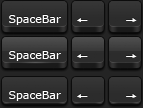
<style>
.page{position:relative;width:143px;height:108px}
.page>*{position:absolute;margin:0}
.t1{font:11px "Verdana";color:#ffffff}
.t2{font:11px "STHeitiSC-Light";color:#ffffff}
</style>
<div class="page">
<p class="t1" style="left:9px;top:15px;width:52px;height:10px">SpaceBar</p>
<p class="t2" style="left:77px;top:18px;width:11px;height:4px">←</p>
<p class="t2" style="left:126px;top:18px;width:11px;height:4px">→</p>
<p class="t1" style="left:9px;top:51px;width:52px;height:10px">SpaceBar</p>
<p class="t2" style="left:77px;top:54px;width:11px;height:4px">←</p>
<p class="t2" style="left:126px;top:54px;width:11px;height:4px">→</p>
<p class="t1" style="left:9px;top:91px;width:52px;height:10px">SpaceBar</p>
<p class="t2" style="left:77px;top:94px;width:11px;height:4px">←</p>
<p class="t2" style="left:126px;top:94px;width:11px;height:4px">→</p>
</div>
